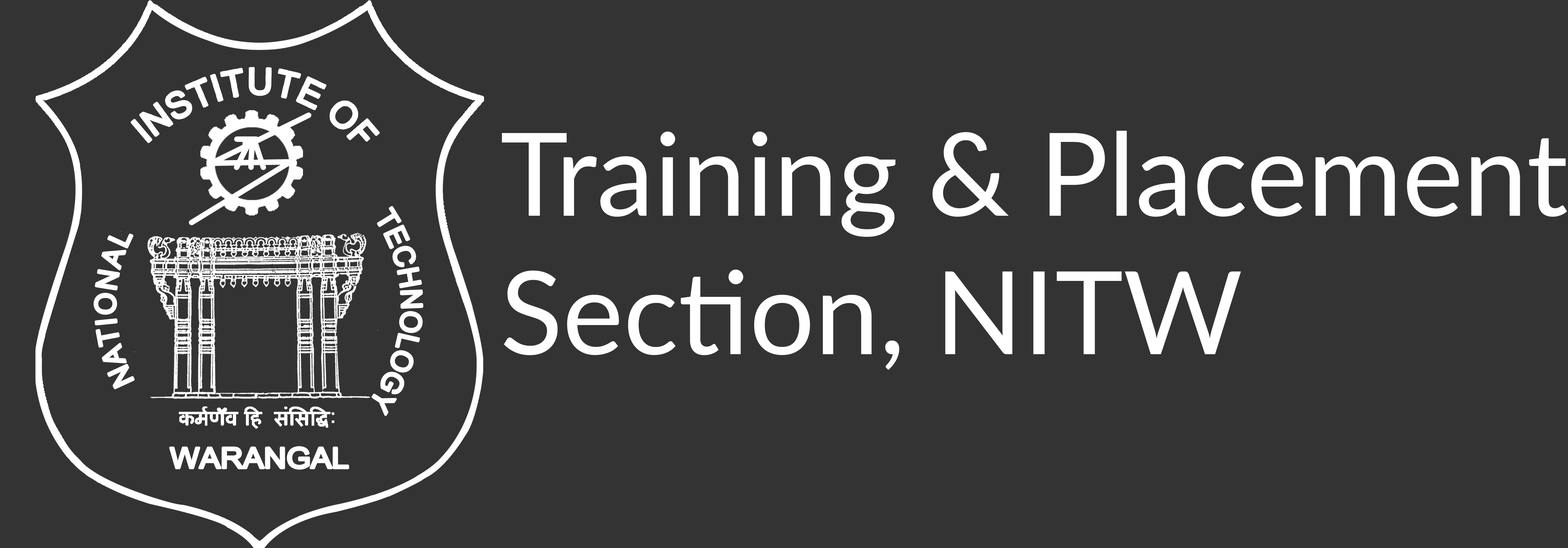
<style>
.page{position:relative;width:1568px;height:548px;background:#333333}
.page>*{position:absolute;margin:0}
.t1{font:115.3px "Lato-Regular";color:#ffffff}
</style>
<div class="page">
<p class="t1" style="left:502px;top:131px;width:1065px;height:239px">Training &amp; Placement <br>Section, NITW</p>
</div>
